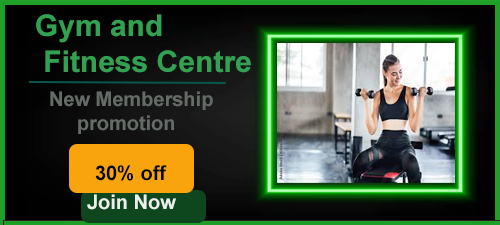
<style>
.page{position:relative;width:500px;height:225px}
.page>*{position:absolute;margin:0}
.t1{font:30px "Arial-BoldMT";color:#32a252}
.t2{font:20px "Arial-BoldMT";color:#656b67}
.t3{font:20px "Arial-BoldMT";color:#010803}
.t4{font:20px "Arial-BoldMT";color:#e9efeb}
</style>
<div class="page">
<p class="t1" style="left:36px;top:14px;width:215px;height:59px">Gym and <br> Fitness Centre</p>
<p class="t2" style="left:50px;top:91px;width:163px;height:43px">New Membership <br>     promotion</p>
<p class="t3" style="left:95px;top:165px;width:72px;height:16px">30% off</p>
<p class="t4" style="left:87px;top:194px;width:89px;height:16px">Join Now</p>
</div>
